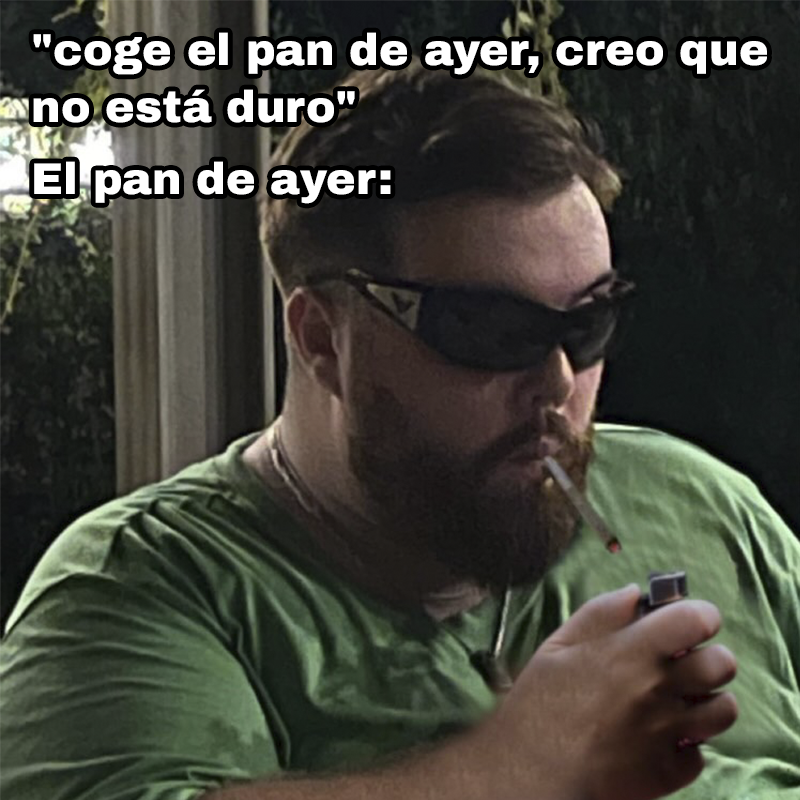
<style>
.page{position:relative;width:800px;height:800px}
.page>*{position:absolute;margin:0}
.t1{font:44.4px "ArchivoBlack-Regular";color:#ffffff}
</style>
<div class="page">
<p class="t1" style="left:33px;top:32px;width:734px;height:172px">"coge el pan de ayer, creo que<br>no está duro"<br>El pan de ayer:</p>
</div>
